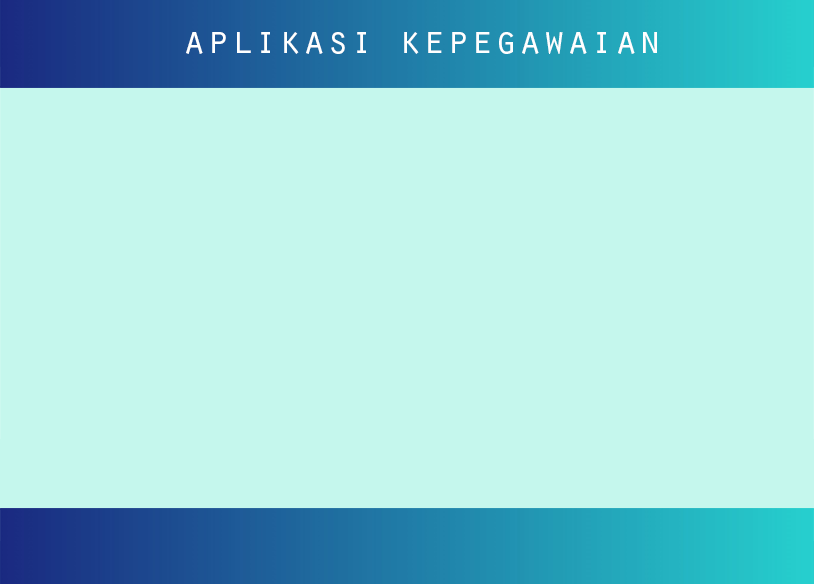
<style>
.page{position:relative;width:814px;height:584px;background:#c5f7ed}
.page>*{position:absolute;margin:0}
.t1{font:40px "OratorStd";color:#ffffff}
</style>
<div class="page">
<p class="t1" style="left:186px;top:32px;width:471px;height:22px">aplikasi kepegawaian</p>
</div>
